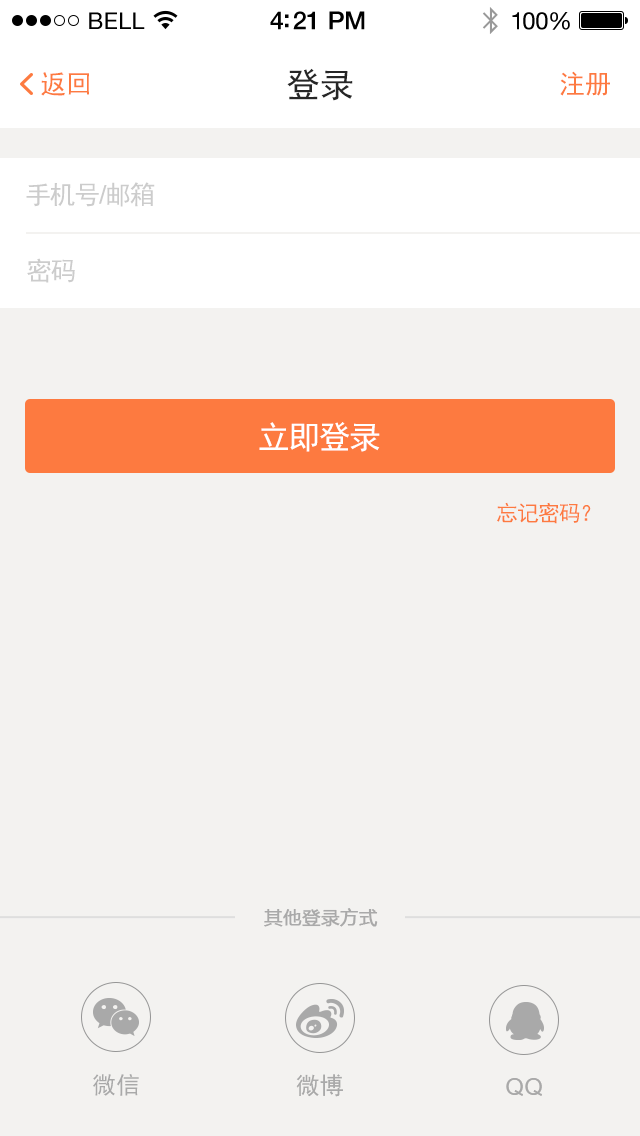
<style>
.page{position:relative;width:640px;height:1136px;background:#f3f2f0}
.page>*{position:absolute;margin:0}
.t1{font:23px "HelveticaNeue";letter-spacing:0.02em;color:#000000}
.t2{font:25px "HelveticaNeue-Medium";letter-spacing:-0.02em;color:#000000}
.t3{font:24px "HelveticaNeue";letter-spacing:-0.02em;color:#010101}
.t4{font:26px "SimHei";color:#fd7a40}
.t5{font:34px "SimHei";color:#262626}
.t6{font:26px "SimHei";letter-spacing:-0.05em;color:#cccccc}
.t7{font:26px "ArialMT";letter-spacing:-0.05em;color:#cccccc}
.t8{font:32px "SimHei";letter-spacing:-0.05em;color:#ffffff}
.t9{font:22px "SimHei";letter-spacing:-0.05em;color:#fd7a40}
.t10{font:18px "MicrosoftYaHei";color:#a9a9a9;font-weight:bold}
.t11{font:24px "SimHei";color:#a9a9a9}
.t12{font:24px "ArialMT";color:#a9a9a9}
</style>
<div class="page">
<p class="t1" style="left:89px;top:12px;width:56px;height:17px">BELL</p>
<p class="t2" style="left:270px;top:11px;width:95px;height:19px">4:21 PM</p>
<p class="t3" style="left:512px;top:12px;width:58px;height:18px">100%</p>
<p class="t4" style="left:41px;top:72px;width:48px;height:24px">返回</p>
<p class="t5" style="left:287px;top:68px;width:66px;height:33px">登录</p>
<p class="t4" style="left:560px;top:71px;width:50px;height:25px">注册</p>
<p class="t6" style="left:26px;top:182px;width:129px;height:25px">手机号<span class="t7">/</span>邮箱</p>
<p class="t6" style="left:27px;top:258px;width:48px;height:25px">密码</p>
<p class="t8" style="left:259px;top:422px;width:121px;height:30px">立即登录</p>
<p class="t9" style="left:497px;top:502px;width:94px;height:22px">忘记密码？</p>
<p class="t10" style="left:264px;top:908px;width:114px;height:19px">其他登录方式</p>
<p class="t11" style="left:93px;top:1074px;width:46px;height:22px">微信</p>
<p class="t11" style="left:296px;top:1074px;width:47px;height:23px">微博</p>
<p class="t12" style="left:506px;top:1078px;width:36px;height:18px">QQ</p>
</div>
